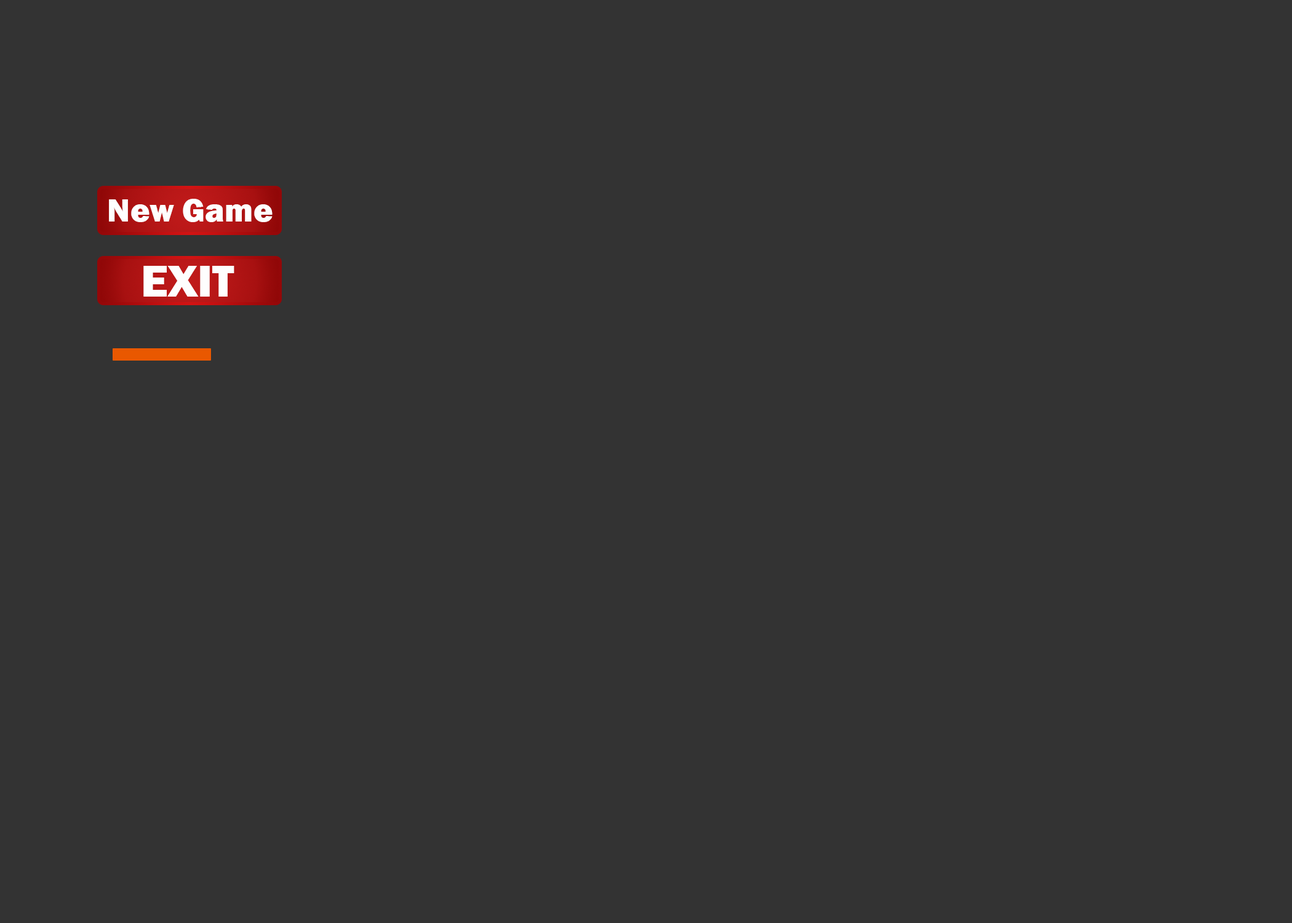
<style>
.page{position:relative;width:1292px;height:923px;background:#333333}
.page>*{position:absolute;margin:0}
.t1{font:33.3px "FranklinGothic-Heavy";color:#fefefe}
.t2{font:46.1px "FranklinGothic-Heavy";color:#fefefe}
</style>
<div class="page">
<p class="t1" style="left:109px;top:199px;width:164px;height:23px">New Game</p>
<p class="t2" style="left:143px;top:266px;width:91px;height:31px">EXIT</p>
</div>
